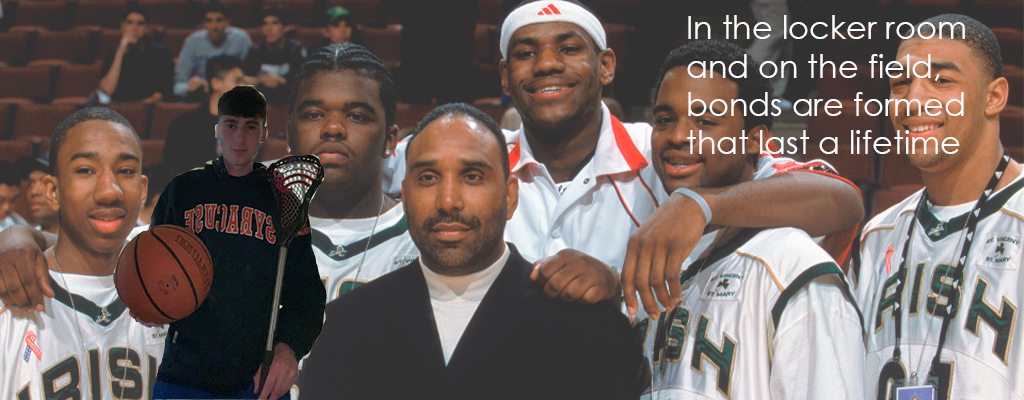
<style>
.page{position:relative;width:1024px;height:400px}
.page>*{position:absolute;margin:0}
.t1{font:32px "CenturyGothic";color:#fdfbfb}
</style>
<div class="page">
<p class="t1" style="left:687px;top:15px;width:278px;height:139px">In the locker room <br>and on the field, <br>bonds are formed <br>that last a lifetime</p>
</div>
